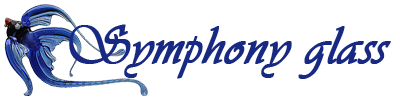
<style>
.page{position:relative;width:400px;height:100px;background:#ffffff}
.page>*{position:absolute;margin:0}
.t1{font:55px "Vivaldii";color:#172983;font-weight:bold}
</style>
<div class="page">
<p class="t1" style="left:69px;top:24px;width:322px;height:55px">Symphony glass</p>
</div>
